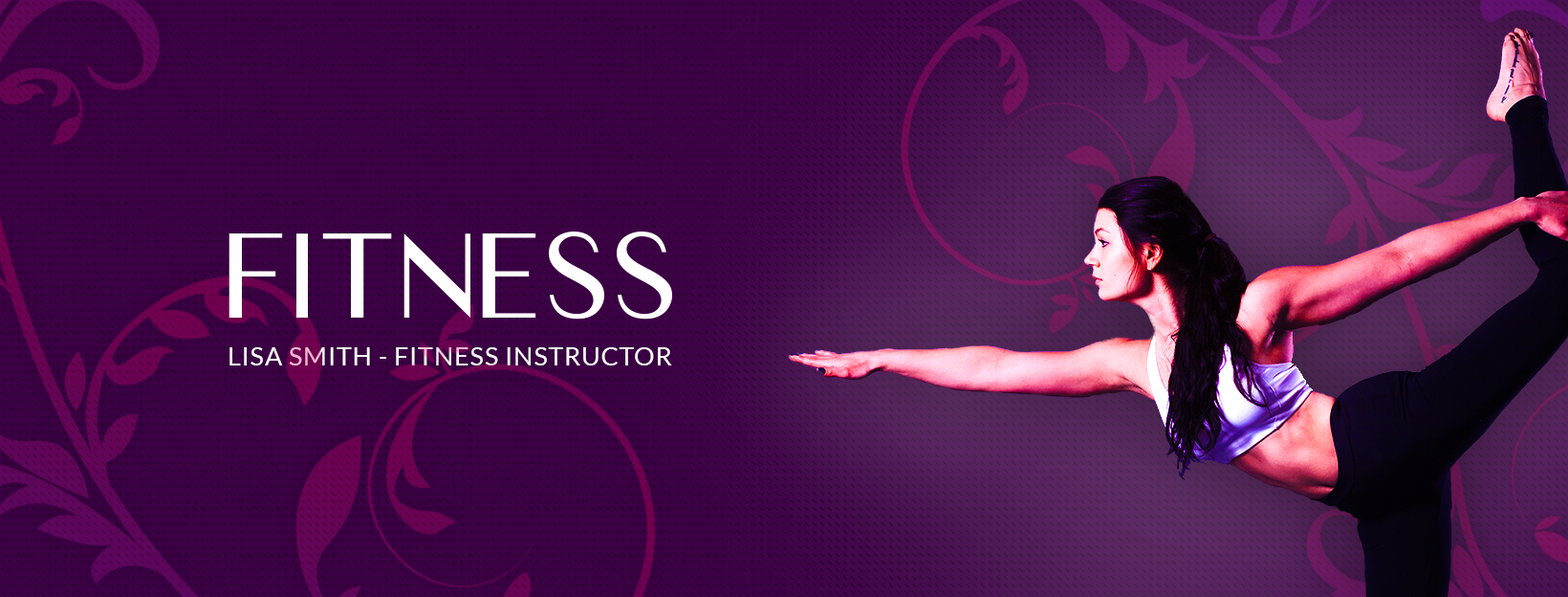
<style>
.page{position:relative;width:1568px;height:597px}
.page>*{position:absolute;margin:0}
.t1{font:114.7px "Luxia-Regular";letter-spacing:0.03em;color:#ffffff;text-transform:uppercase}
.t2{font:25.8px "Lato-Regular";letter-spacing:0.03em;color:#ffffff;text-transform:uppercase}
</style>
<div class="page">
<p class="t1" style="left:229px;top:231px;width:443px;height:88px">fitness</p>
<p class="t2" style="left:229px;top:347px;width:443px;height:18px">lisa smith - fitness instructor</p>
</div>
